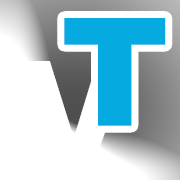
<style>
.page{position:relative;width:180px;height:180px;background:#ffffff}
.page>*{position:absolute;margin:0}
.t1{font:150px "Arial-Black";color:#05aae0}
.t2{font:150px "Arial-Black";color:#ffffff}
</style>
<div class="page">
<p class="t1" style="left:64px;top:18px;width:102px;height:108px">T</p>
<p class="t2" style="left:14px;top:61px;width:118px;height:108px">V</p>
</div>
